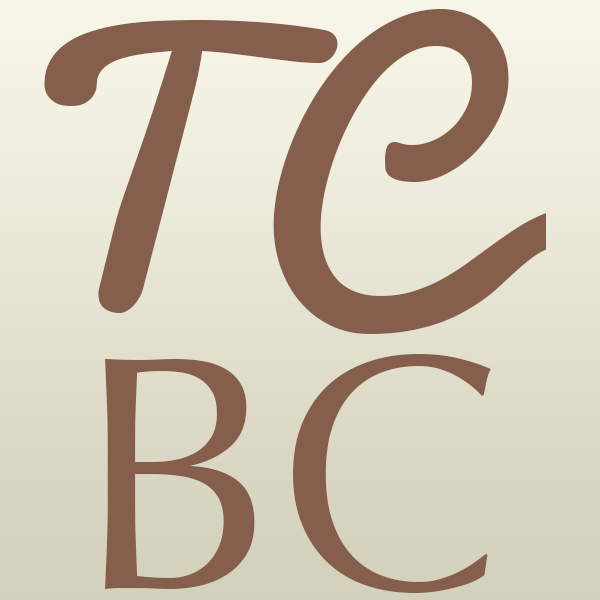
<style>
.page{position:relative;width:600px;height:600px;background:#855f4c}
.page>*{position:absolute;margin:0}
.t1{font:334.8px "Pacifico";color:#855f4c}
.t2{font:334.8px "Optima-Regular";color:#855f4c}
</style>
<div class="page">
<p class="t1" style="left:44px;top:9px;width:502px;height:325px">TC</p>
<p class="t2" style="left:105px;top:354px;width:386px;height:239px">BC</p>
</div>
